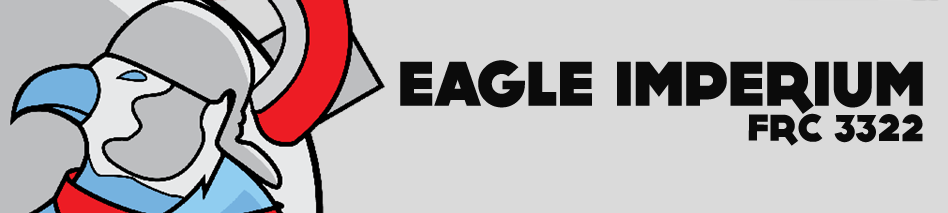
<style>
.page{position:relative;width:948px;height:213px;background:#dadada}
.page>*{position:absolute;margin:0}
.t1{font:63.4px "DOCK11-Heavy";color:#0b0b0b}
.t2{font:37.6px "DOCK11-Heavy";color:#0b0b0b}
</style>
<div class="page">
<p class="t1" style="left:400px;top:60px;width:523px;height:54px">EAGLE IMPERIUM</p>
<p class="t2" style="left:748px;top:113px;width:175px;height:33px">FRC 3322</p>
</div>
